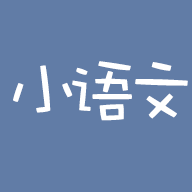
<style>
.page{position:relative;width:192px;height:192px;background:#617ca6}
.page>*{position:absolute;margin:0}
.t1{font:75px "DFWaWaSC-W5";letter-spacing:-0.2em;color:#ffffff}
</style>
<div class="page">
<p class="t1" style="left:13px;top:61px;width:175px;height:60px">小语文</p>
</div>
